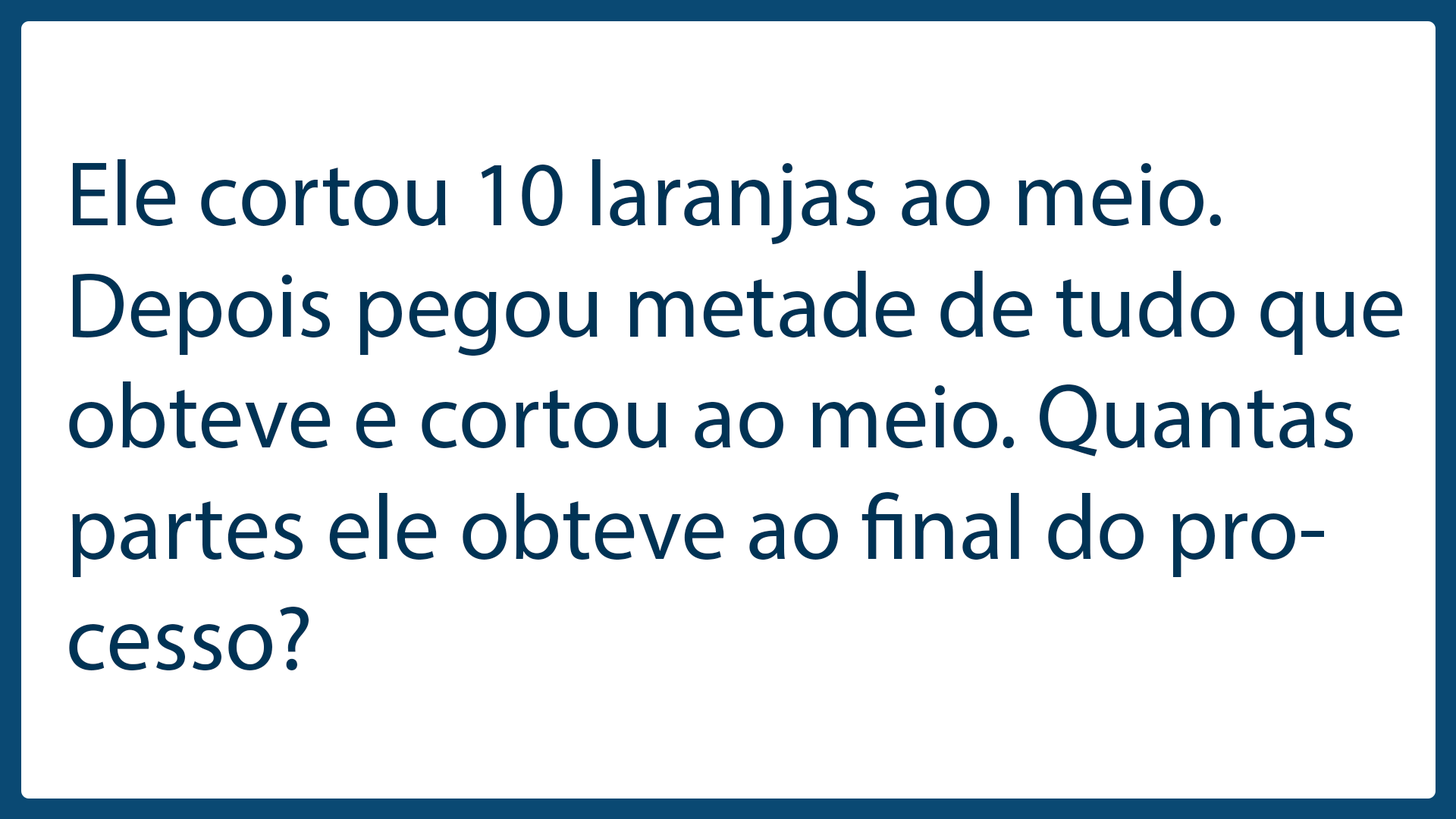
<style>
.page{position:relative;width:1456px;height:819px;background:#ffffff}
.page>*{position:absolute;margin:0}
.t1{font:92.6px "MyriadPro-Regular";color:#003355}
</style>
<div class="page">
<p class="t1" style="left:69px;top:159px;width:1334px;height:511px">Ele cortou 10 laranjas ao meio. Depois pegou metade de tudo que obteve e cortou ao meio. Quantas partes ele obteve ao final do processo?</p>
</div>
